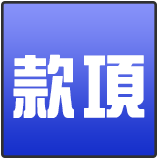
<style>
.page{position:relative;width:160px;height:160px;background:#ffffff}
.page>*{position:absolute;margin:0}
.t1{font:70.6px "DFZongYi-XB";letter-spacing:0.08em;color:#ffffff;scale:0.93 1}
</style>
<div class="page">
<p class="t1" style="left:13px;top:54px;width:132px;height:64px">款項</p>
</div>
